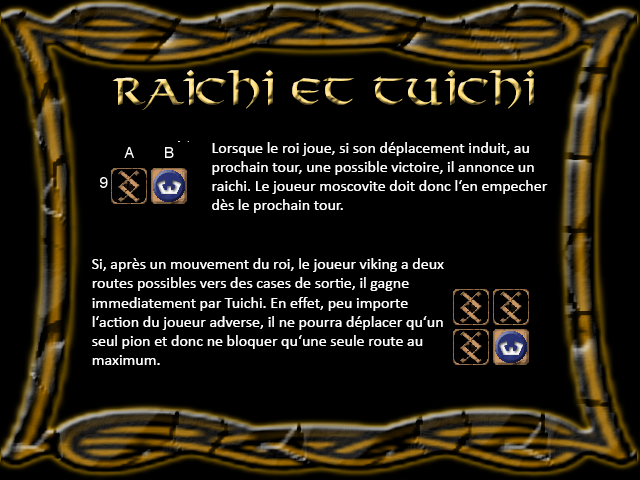
<style>
.page{position:relative;width:640px;height:480px;background:#000000}
.page>*{position:absolute;margin:0}
.t1{font:36px "Viking-Normal"}
.t2{font:16px "Calibri";color:#ffffff}
</style>
<div class="page">
<p class="t1" style="left:112px;top:70px;width:422px;height:40px">Raichi et tuichi</p>
<p class="t2" style="left:212px;top:142px;width:336px;height:71px">Lorsque le roi joue, si son déplacement induit, au prochain tour, une possible victoire, il annonce un raichi. Le joueur moscovite doit donc l‘en empecher dès le prochain tour.</p>
<p class="t2" style="left:92px;top:258px;width:352px;height:107px">Si, après un mouvement du roi, le joueur viking a deux routes possibles vers des cases de sortie, il gagne immediatement par Tuichi. En effet, peu importe l‘action du joueur adverse, il ne pourra déplacer qu‘un seul pion et donc ne bloquer qu‘une seule route au maximum.</p>
</div>
